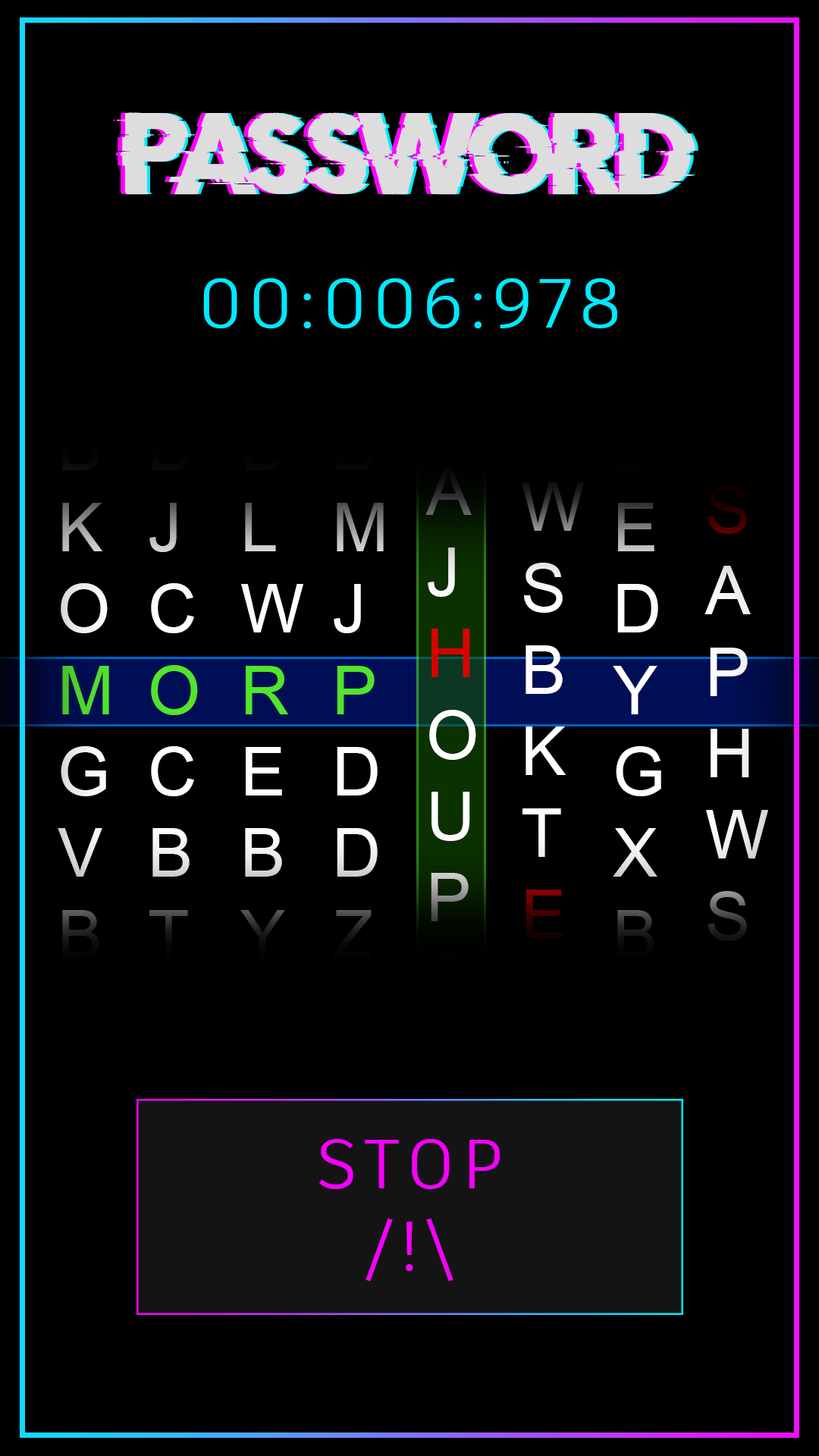
<style>
.page{position:relative;width:819px;height:1456px;background:#000000}
.page>*{position:absolute;margin:0}
.t1{font:91px "DoctorGlitch";letter-spacing:-0.025em;color:#dddddd}
.t2{font:67.9px "ArialMT"}
.t3{font:68.2px "ArtifaktElement-Regular";letter-spacing:0.1em;color:#00eaff}
.t4{font:68.2px "ArtifaktElement-Regular";letter-spacing:0.1em;color:#f600ff}
</style>
<div class="page">
<p class="t1" style="left:112px;top:112px;width:579px;height:83px">PASSWORD</p>
<p class="t1" style="left:117px;top:112px;width:578px;height:83px">PASSWORD</p>
<p class="t1" style="left:120px;top:112px;width:578px;height:83px">PASSWORD</p>
<p class="t2" style="left:425px;top:221px;width:51px;height:945px">A<br>S<br>B<br>A<br>J<br>H<br>O U<br>P<br>S<br>O<br>A</p>
<p class="t2" style="left:704px;top:240px;width:64px;height:945px">A<br>S<br>B<br>S<br>A<br>P<br>H W<br>S<br>S<br>O<br>A</p>
<p class="t2" style="left:57px;top:259px;width:52px;height:944px">A<br>S<br>B<br>K<br>O<br>M<br>G V<br>B<br>S<br>O<br>A</p>
<p class="t2" style="left:147px;top:259px;width:51px;height:863px">A<br>S<br>B<br>J<br>C<br>O<br>C<br>B<br>T<br>O<br>A</p>
<p class="t2" style="left:240px;top:259px;width:63px;height:944px">A<br>S<br>B<br>L<br>W<br>R<br>E<br>B<br>Y<br>S<br>O<br>A</p>
<p class="t2" style="left:331px;top:259px;width:53px;height:944px">A<br>S<br>B<br>M<br>J<br>P<br>D<br>D<br>Z<br>S<br>O<br>A</p>
<p class="t2" style="left:612px;top:259px;width:51px;height:944px">A<br>S<br>B<br>E<br>D<br>Y<br>G X<br>B<br>S<br>O<br>A</p>
<p class="t3" style="left:203px;top:278px;width:414px;height:50px">00:006:978</p>
<p class="t2" style="left:520px;top:482px;width:64px;height:863px">W<br>S<br>B<br>K<br>T<br>E<br>V<br>B<br>S<br>O<br>A</p>
<p class="t4" style="left:319px;top:1139px;width:181px;height:143px;text-align:center">STOP<br>/!\</p>
</div>
